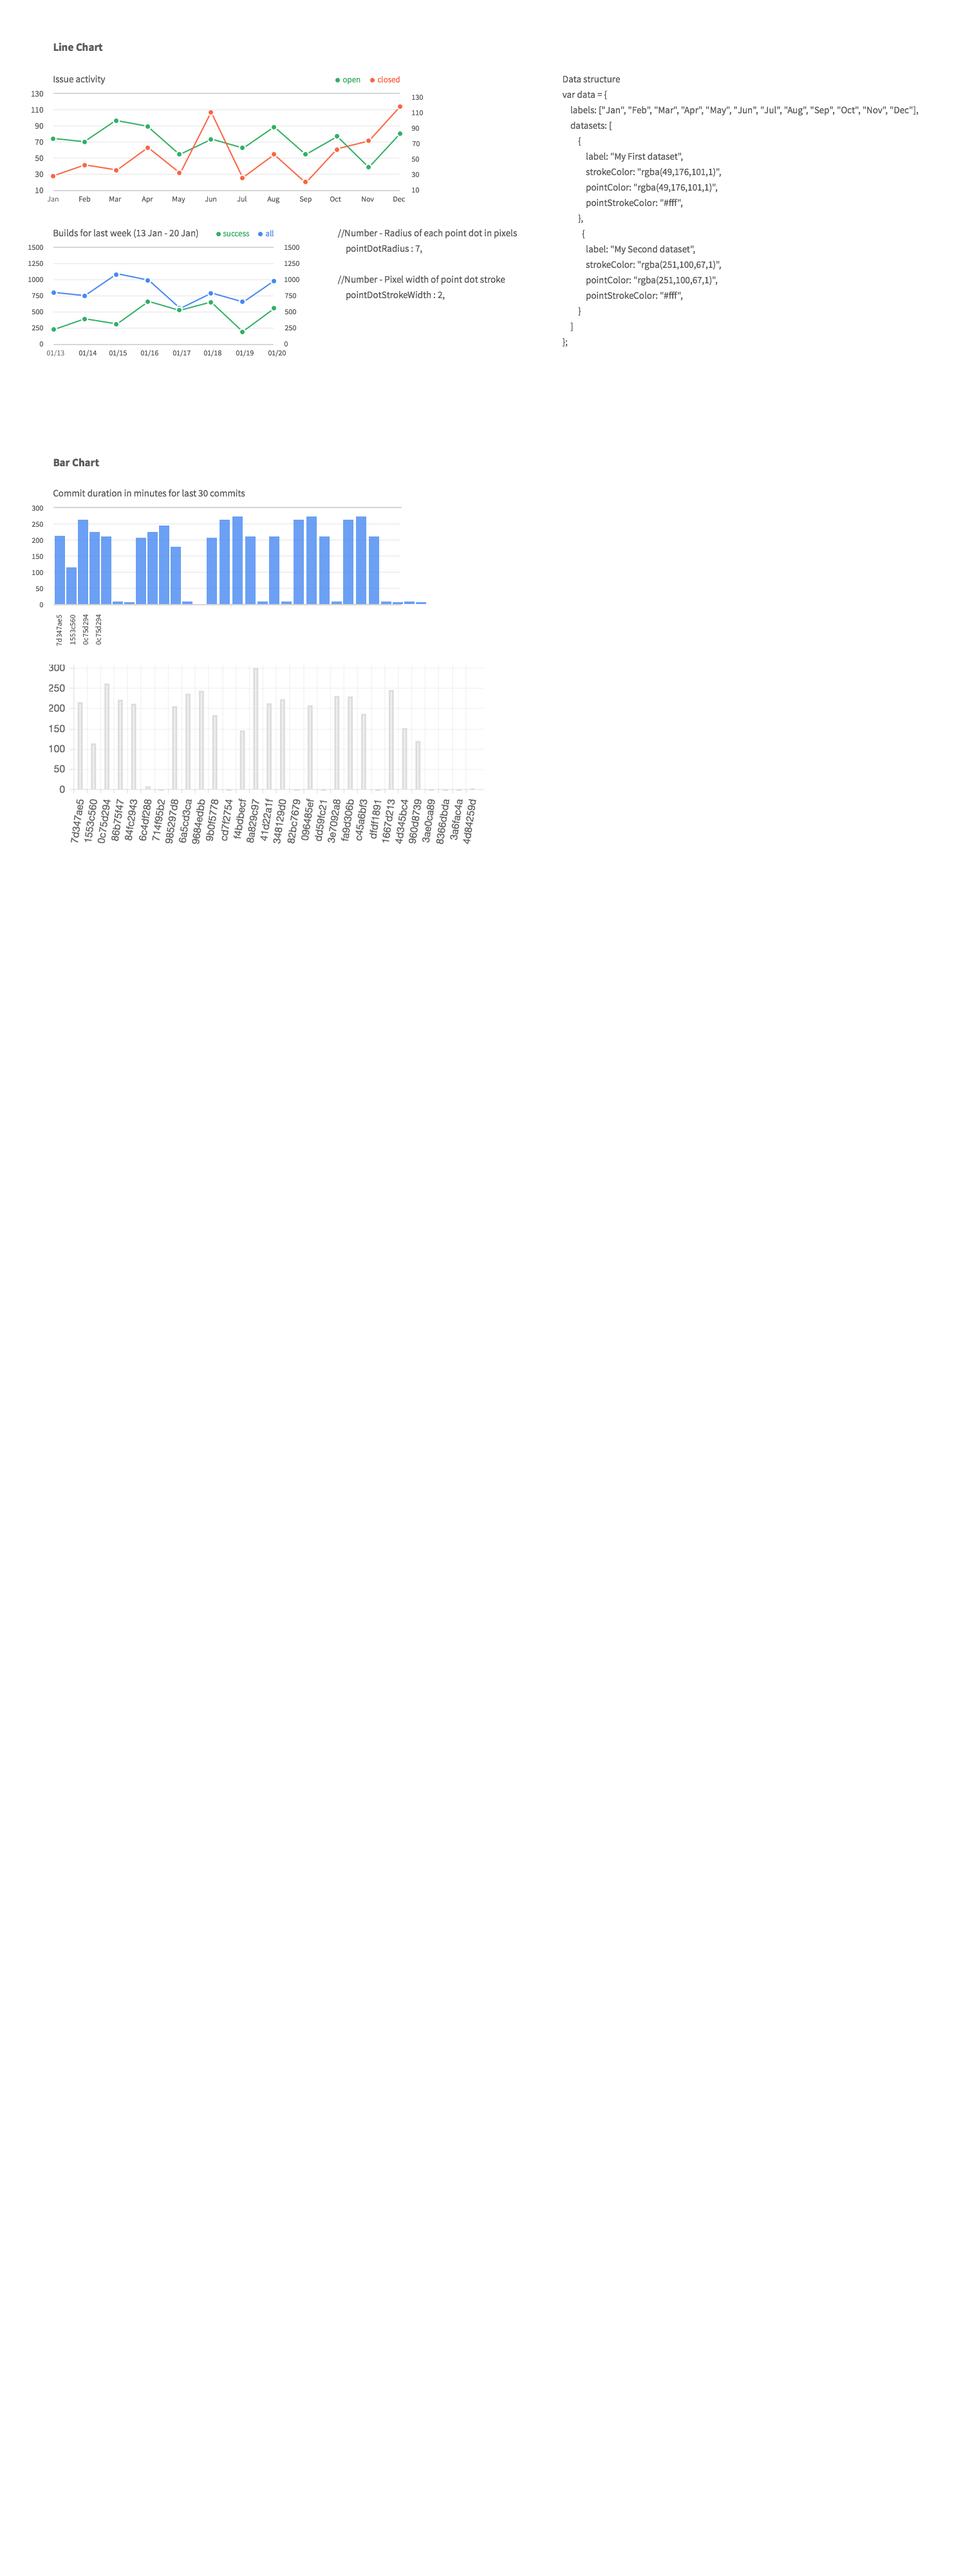
<style>
.page{position:relative;width:974px;height:2576px;background:#ffffff}
.page>*{position:absolute;margin:0}
.t1{font:10.9px "SourceSansPro-Bold";color:#5c5c5c}
.t2{font:9.7px "SourceSansPro-Regular";color:#5c5c5c}
.t3{font:8.4px "SourceSansPro-Regular";color:#31b065}
.t4{font:8.4px "SourceSansPro-Regular";color:#fb6443}
.t5{font:9.7px/15.5px "SourceSansPro-Regular";color:#5c5c5c}
.t6{font:8.4px "SourceSansPro-Regular";color:#5c5c5c}
.t7{font:7.7px "SourceSansPro-Regular";color:#5c5c5c}
.t8{font:8.4px "SourceSansPro-Regular";color:#4688f1}
.t9{font:7.7px/16.1px "SourceSansPro-Regular";color:#5c5c5c}
</style>
<div class="page">
<p class="t1" style="left:53px;top:43px;width:50px;height:9px">Line Chart</p>
<p class="t2" style="left:53px;top:75px;width:53px;height:10px">Issue activity</p>
<p class="t3" style="left:343px;top:78px;width:18px;height:6px">open</p>
<p class="t4" style="left:377px;top:76px;width:23px;height:7px">closed</p>
<p class="t5" style="left:562px;top:75px;width:357px;height:272px">Data structure<br>var data = {<br>    labels: ["Jan", "Feb", "Mar", "Apr", "May", "Jun", "Jul", "Aug", "Sep", "Oct", "Nov", "Dec"],<br>    datasets: [<br>        {<br>            label: "My First dataset",<br>            strokeColor: "rgba(49,176,101,1)",<br>            pointColor: "rgba(49,176,101,1)",<br>            pointStrokeColor: "#fff",<br>        },<br>          {<br>            label: "My Second dataset",<br>            strokeColor: "rgba(251,100,67,1)",<br>            pointColor: "rgba(251,100,67,1)",<br>            pointStrokeColor: "#fff",<br>        }<br>    ]<br>};</p>
<p class="t6" style="left:31px;top:91px;width:13px;height:6px">130</p>
<p class="t7" style="left:412px;top:95px;width:11px;height:5px">130</p>
<p class="t6" style="left:31px;top:107px;width:13px;height:6px">110</p>
<p class="t7" style="left:412px;top:110px;width:11px;height:6px">110</p>
<p class="t6" style="left:35px;top:123px;width:9px;height:6px">90</p>
<p class="t7" style="left:412px;top:126px;width:7px;height:5px">90</p>
<p class="t6" style="left:35px;top:139px;width:9px;height:7px">70</p>
<p class="t7" style="left:412px;top:141px;width:8px;height:6px">70</p>
<p class="t6" style="left:35px;top:155px;width:9px;height:7px">50</p>
<p class="t7" style="left:412px;top:156px;width:7px;height:6px">50</p>
<p class="t6" style="left:35px;top:171px;width:9px;height:7px">30</p>
<p class="t7" style="left:412px;top:172px;width:7px;height:6px">30</p>
<p class="t6" style="left:35px;top:187px;width:9px;height:7px">10</p>
<p class="t7" style="left:47px;top:196px;width:12px;height:6px">Jan</p>
<p class="t7" style="left:79px;top:196px;width:12px;height:6px">Feb</p>
<p class="t7" style="left:109px;top:196px;width:13px;height:6px">Mar</p>
<p class="t7" style="left:142px;top:196px;width:11px;height:8px">Apr</p>
<p class="t7" style="left:173px;top:196px;width:12px;height:8px">May</p>
<p class="t7" style="left:205px;top:196px;width:12px;height:6px">Jun</p>
<p class="t7" style="left:237px;top:196px;width:10px;height:6px">Jul</p>
<p class="t7" style="left:267px;top:196px;width:13px;height:8px">Aug</p>
<p class="t7" style="left:299px;top:196px;width:13px;height:8px">Sep</p>
<p class="t7" style="left:330px;top:196px;width:11px;height:6px">Oct</p>
<p class="t7" style="left:362px;top:196px;width:12px;height:6px">Nov</p>
<p class="t7" style="left:393px;top:196px;width:12px;height:6px">Dec</p>
<p class="t7" style="left:412px;top:187px;width:7px;height:6px">10</p>
<p class="t2" style="left:53px;top:229px;width:145px;height:9px">Builds for last week (13 Jan - 20 Jan)</p>
<p class="t3" style="left:223px;top:232px;width:27px;height:5px">success</p>
<p class="t8" style="left:265px;top:230px;width:9px;height:7px">all</p>
<p class="t5" style="left:337px;top:229px;width:180px;height:72px">//Number - Radius of each point dot in pixels<br>    pointDotRadius : 7,<br><br>//Number - Pixel width of point dot stroke<br>    pointDotStrokeWidth : 2,</p>
<p class="t7" style="left:28px;top:245px;width:15px;height:6px">1500</p>
<p class="t7" style="left:285px;top:245px;width:14px;height:6px">1500</p>
<p class="t7" style="left:28px;top:261px;width:15px;height:6px">1250</p>
<p class="t7" style="left:285px;top:261px;width:14px;height:6px">1250</p>
<p class="t7" style="left:28px;top:277px;width:15px;height:6px">1000</p>
<p class="t7" style="left:285px;top:277px;width:14px;height:6px">1000</p>
<p class="t7" style="left:32px;top:293px;width:11px;height:6px">750</p>
<p class="t7" style="left:285px;top:293px;width:11px;height:6px">750</p>
<p class="t7" style="left:32px;top:309px;width:11px;height:6px">500</p>
<p class="t7" style="left:285px;top:309px;width:11px;height:6px">500</p>
<p class="t7" style="left:32px;top:325px;width:11px;height:6px">250</p>
<p class="t7" style="left:285px;top:325px;width:11px;height:6px">250</p>
<p class="t7" style="left:39px;top:341px;width:4px;height:6px">0</p>
<p class="t7" style="left:284px;top:341px;width:4px;height:6px">0</p>
<p class="t7" style="left:46px;top:350px;width:18px;height:7px">01/13</p>
<p class="t7" style="left:79px;top:350px;width:18px;height:7px">01/14</p>
<p class="t7" style="left:109px;top:350px;width:18px;height:7px">01/15</p>
<p class="t7" style="left:140px;top:350px;width:18px;height:7px">01/16</p>
<p class="t7" style="left:173px;top:350px;width:18px;height:7px">01/17</p>
<p class="t7" style="left:204px;top:350px;width:18px;height:7px">01/18</p>
<p class="t7" style="left:236px;top:350px;width:18px;height:7px">01/19</p>
<p class="t7" style="left:268px;top:350px;width:18px;height:7px">01/20</p>
<p class="t1" style="left:53px;top:458px;width:46px;height:9px">Bar Chart</p>
<p class="t2" style="left:53px;top:489px;width:192px;height:8px">Commit duration in minutes for last 30 commits</p>
<p class="t9" style="left:32px;top:506px;width:11px;height:102px;text-align:right">300<br>250<br>200<br>150<br>100<br>50<br>0</p>
<p class="t7" style="left:56px;top:614px;width:6px;height:32px;rotate:-90deg">7d347ae5</p>
<p class="t7" style="left:70px;top:614px;width:5px;height:31px;rotate:-90deg">1553c560</p>
<p class="t7" style="left:82px;top:614px;width:6px;height:31px;rotate:-90deg">0c75d294</p>
<p class="t7" style="left:95px;top:614px;width:6px;height:31px;rotate:-90deg">0c75d294</p>
</div>
